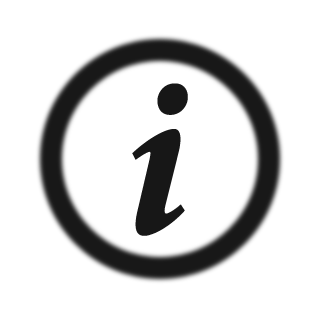
<style>
.page{position:relative;width:320px;height:320px;background:#ffffff}
.page>*{position:absolute;margin:0}
.t1{font:229px "MinionPro-BoldIt";color:#171717}
</style>
<div class="page">
<p class="t1" style="left:132px;top:83px;width:56px;height:153px">i</p>
</div>
